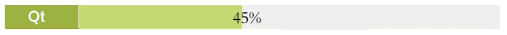
<style>
.page{position:relative;width:507px;height:35px;background:#efefef}
.page>*{position:absolute;margin:0}
.t1{font:13.3px "FZLTCHK--GBK1-0";color:#ffffff}
.t2{font:17px "FZBSK--GBK1-0";color:#000000}
</style>
<div class="page">
<p class="t1" style="left:28px;top:10px;width:17px;height:15px">Qt</p>
<p class="t2" style="left:232px;top:11px;width:29px;height:13px">45%</p>
</div>
